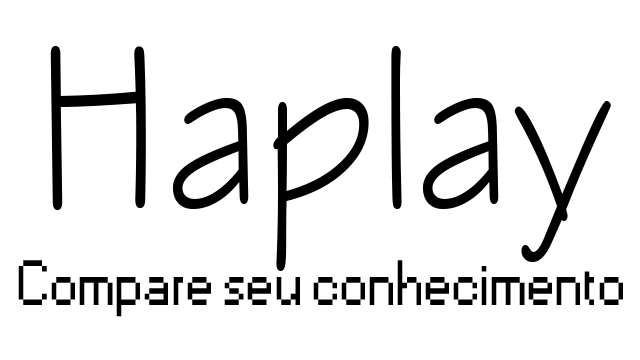
<style>
.page{position:relative;width:640px;height:360px;background:#ffffff}
.page>*{position:absolute;margin:0}
.t1{font:59.6px "Small Fonts";color:#ffffff}
</style>
<div class="page">
<p class="t1" style="left:18px;top:260px;width:605px;height:57px">Compare seu conhecimento</p>
</div>
